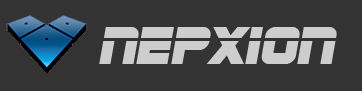
<style>
.page{position:relative;width:362px;height:91px;background:#333333}
.page>*{position:absolute;margin:0}
.t1{font:56px "SFSportsNight";color:#cdcdcd}
</style>
<div class="page">
<p class="t1" style="left:99px;top:27px;width:238px;height:37px">Nepxion</p>
</div>
